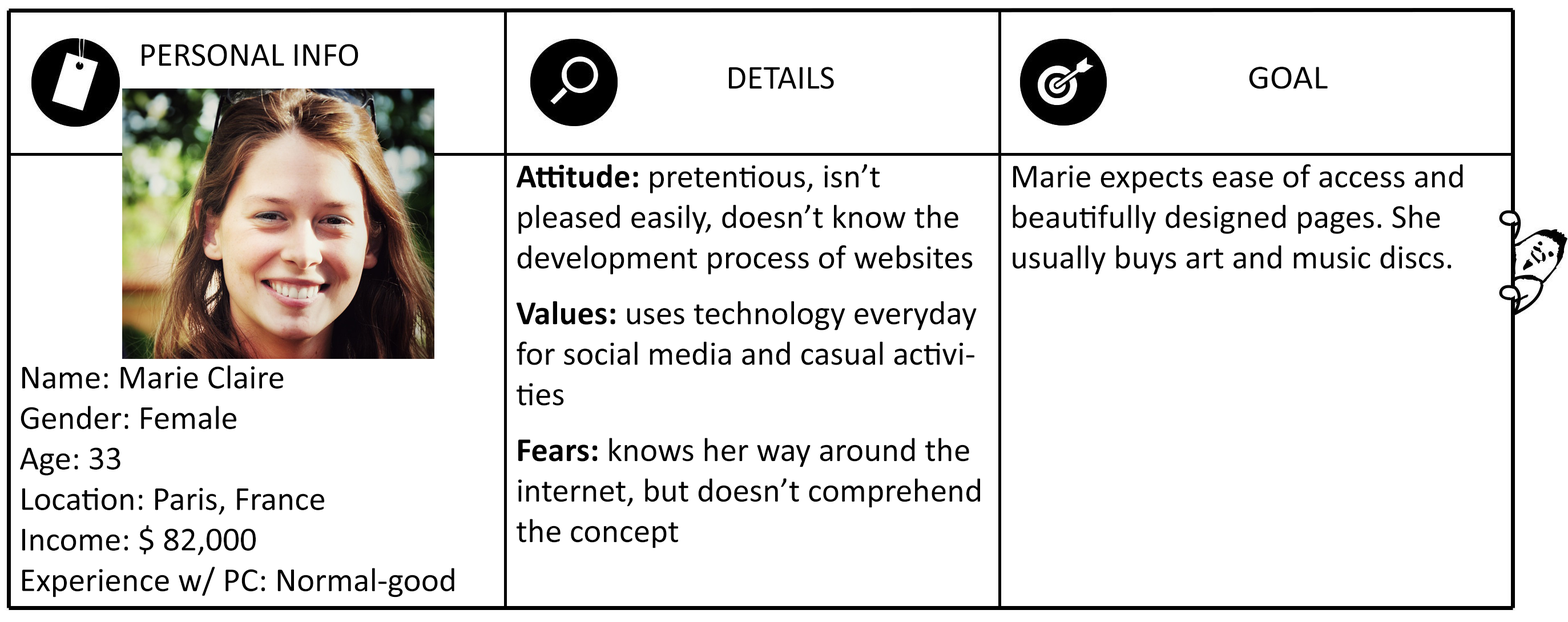
<style>
.page{position:relative;width:1568px;height:622px;background:#ffffff}
.page>*{position:absolute;margin:0}
.t1{font:33.8px "Calibri";color:#000000}
.t2{font:33.8px "Calibri";color:#000000;scale:1.04 1}
.t3{font:33.8px "Calibri-Bold";color:#000000}
</style>
<div class="page">
<p class="t1" style="left:142px;top:44px;width:216px;height:22px">PERSONAL INFO</p>
<p class="t1" style="left:729px;top:67px;width:105px;height:22px">DETAILS</p>
<p class="t2" style="left:1249px;top:67px;width:79px;height:22px">GOAL</p>
<p class="t1" style="left:516px;top:164px;width:464px;height:385px"><span class="t3">Attitude: </span>pretentious, isn’t pleased easily, doesn’t know the development process of websites<br><span class="t3">Values:</span> uses technology everyday for social media and casual activities<br><span class="t3">Fears:</span> knows her way around the internet, but doesn’t comprehend the concept</p>
<p class="t1" style="left:1013px;top:164px;width:450px;height:111px">Marie expects ease of access and beautifully designed pages. She usually buys art and music discs.</p>
<p class="t1" style="left:20px;top:365px;width:434px;height:233px">Name: Marie Claire<br>Gender: Female<br>Age: 33<br>Location: Paris, France<br>Income: $ 82,000<br>Experience w/ PC: Normal-good</p>
</div>
